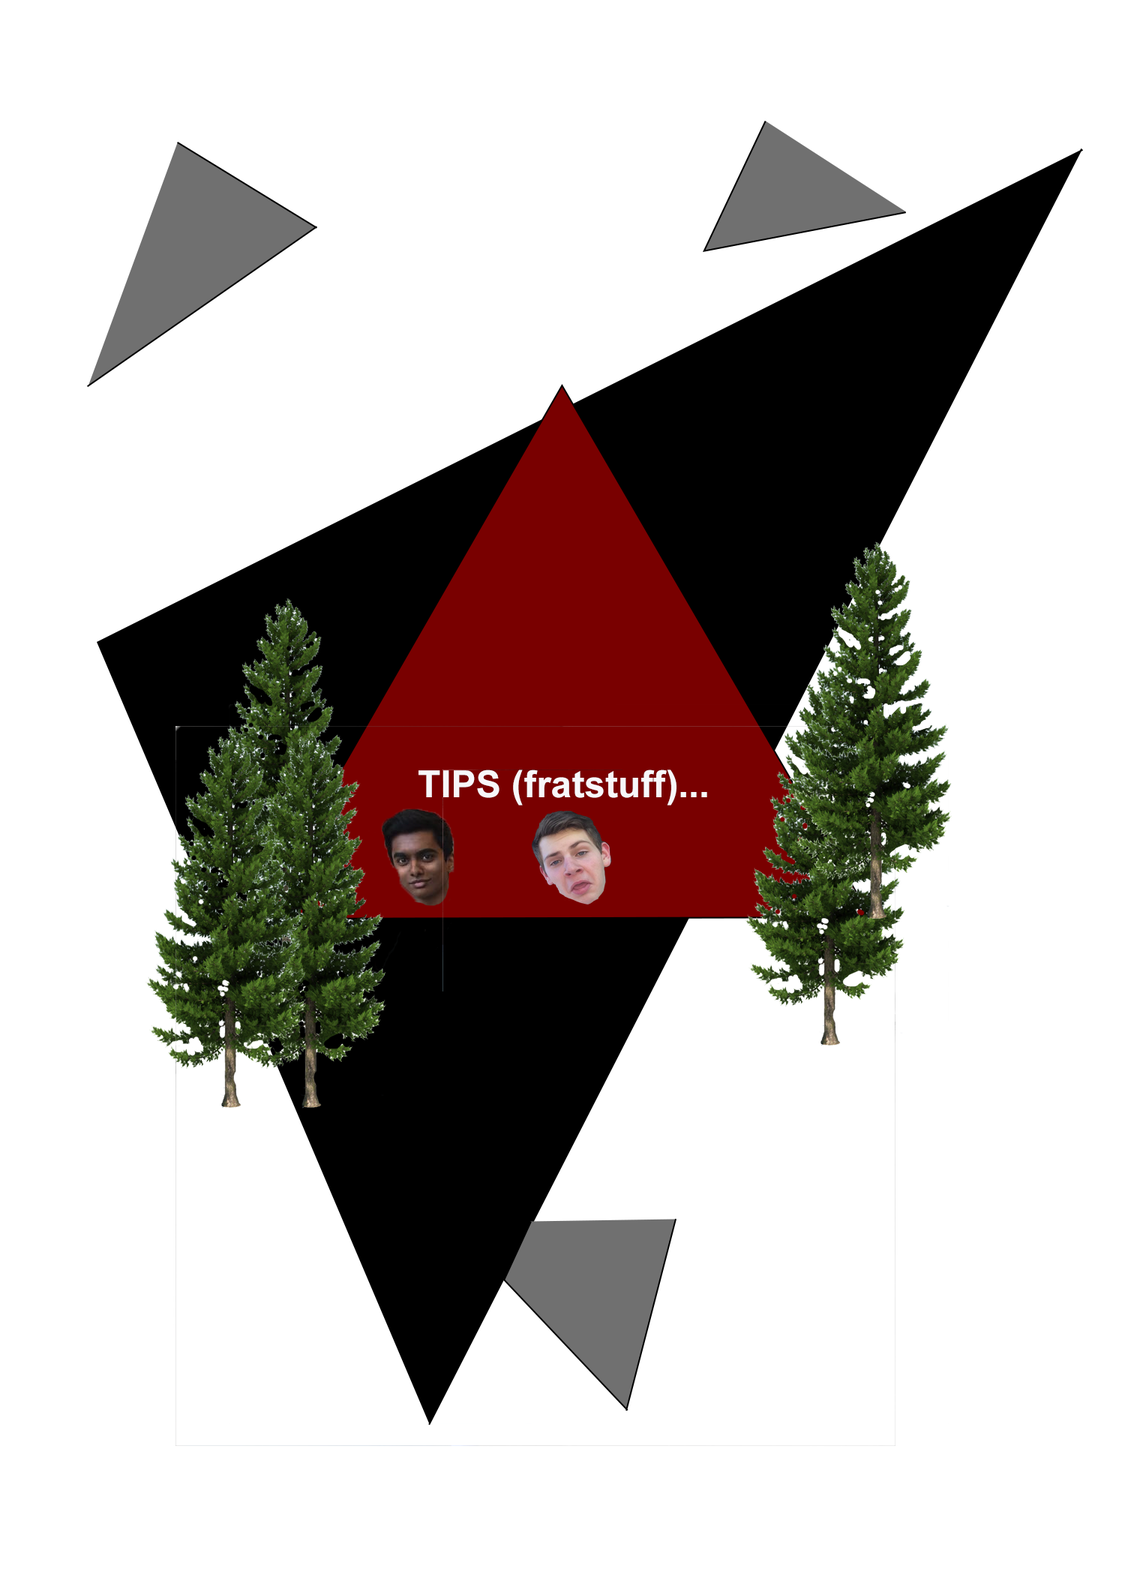
<style>
.page{position:relative;width:1125px;height:1575px;background:#ffffff}
.page>*{position:absolute;margin:0}
.t1{font:9px "Arial-BoldMT";color:#f7f7fa}
</style>
<div class="page">
<p class="t1" style="left:418px;top:770px;width:289px;height:36px">TIPS (fratstuff)...</p>
</div>
